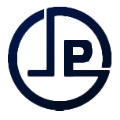
<style>
.page{position:relative;width:120px;height:120px;background:#ffffff}
.page>*{position:absolute;margin:0}
.t1{font:92.2px "FranklinGothic-Demi";color:#00102b}
</style>
<div class="page">
<p class="t1" style="left:64px;top:40px;width:29px;height:37px">P</p>
</div>
